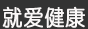
<style>
.page{position:relative;width:88px;height:29px;background:#333333}
.page>*{position:absolute;margin:0}
.t1{font:21.6px "STYuanti-SC-Regular";letter-spacing:0.05em;color:#faf7f7;font-weight:bold;scale:0.9 1}
</style>
<div class="page">
<p class="t1" style="left:2px;top:6px;width:83px;height:22px">就爱健康</p>
</div>
